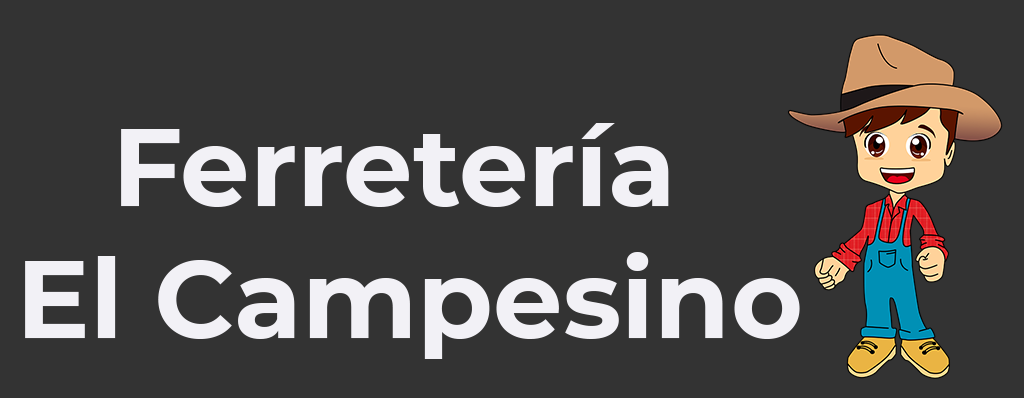
<style>
.page{position:relative;width:1024px;height:398px;background:#333333}
.page>*{position:absolute;margin:0}
.t1{font:110px "Montserrat-Bold";color:#f2f1f6}
</style>
<div class="page">
<p class="t1" style="left:25px;top:123px;width:775px;height:236px;text-align:center">Ferretería <br>El Campesino</p>
</div>
